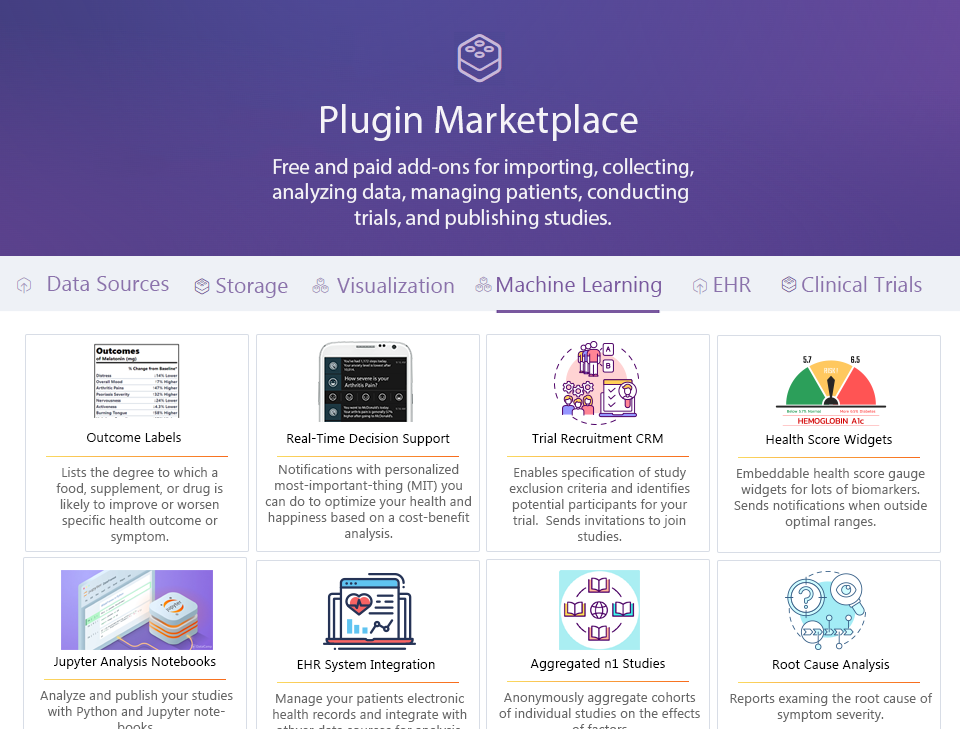
<style>
.page{position:relative;width:960px;height:729px;background:#ffffff}
.page>*{position:absolute;margin:0}
.t1{font:40px "MyriadPro-Regular";color:#f5f3f8}
.t2{font:21.3px "MyriadPro-Regular";color:#f5f3f8}
.t3{font:21.3px "MyanmarText";color:#8b72ac}
.t4{font:21.3px "MyanmarText";color:#79589f}
.t5{font:13.3px "MyanmarText";color:#090909}
.t6{font:13.3px "MyanmarText";color:#000000}
.t7{font:13.3px "MyanmarText";color:#676767}
</style>
<div class="page">
<p class="t1" style="left:321px;top:104px;width:317px;height:37px">Plugin Marketplace</p>
<p class="t2" style="left:272px;top:158px;width:422px;height:71px;text-align:center">Free and paid add-ons for importing, collecting,<br>analyzing data, managing patients, conducting <br>trials, and publishing studies.</p>
<p class="t3" style="left:48px;top:276px;width:121px;height:15px">Data Sources</p>
<p class="t3" style="left:216px;top:278px;width:72px;height:20px">Storage</p>
<p class="t3" style="left:337px;top:277px;width:117px;height:16px">Visualization</p>
<p class="t4" style="left:497px;top:276px;width:164px;height:21px">Machine Learning</p>
<p class="t3" style="left:714px;top:277px;width:37px;height:15px">EHR</p>
<p class="t3" style="left:802px;top:276px;width:120px;height:16px">Clinical Trials</p>
<p class="t5" style="left:87px;top:432px;width:94px;height:10px">Outcome Labels</p>
<p class="t6" style="left:287px;top:433px;width:163px;height:13px">Real-Time Decision Support</p>
<p class="t6" style="left:532px;top:433px;width:131px;height:10px">Trial Recruitment CRM</p>
<p class="t6" style="left:766px;top:434px;width:126px;height:13px">Health Score Widgets</p>
<p class="t7" style="left:56px;top:467px;width:167px;height:77px;text-align:center">Lists the degree to which a food, supplement, or drug is likely to improve or worsen specific health outcome or symptom.</p>
<p class="t7" style="left:265px;top:464px;width:206px;height:77px;text-align:center">Notifications with personalized most-important-thing (MIT) you can do to optimize your health and happiness based on a cost-benefit analysis.</p>
<p class="t7" style="left:509px;top:467px;width:181px;height:74px;text-align:center">Enables specification of study exclusion criteria and identifies potential participants for your trial.  Sends invitations to join studies.</p>
<p class="t7" style="left:734px;top:468px;width:193px;height:61px;text-align:center">Embeddable health score gauge widgets for lots of biomarkers. Sends notifications when outside optimal ranges.</p>
<p class="t6" style="left:54px;top:656px;width:162px;height:13px">Jupyter Analysis Notebooks</p>
<p class="t6" style="left:297px;top:659px;width:138px;height:13px">EHR System Integration</p>
<p class="t6" style="left:530px;top:658px;width:135px;height:13px">Aggregated n1 Studies</p>
<p class="t6" style="left:773px;top:659px;width:117px;height:13px">Root Cause Analysis</p>
<p class="t7" style="left:730px;top:693px;width:203px;height:29px;text-align:center">Reports examing the root cause of symptom severity.</p>
</div>
